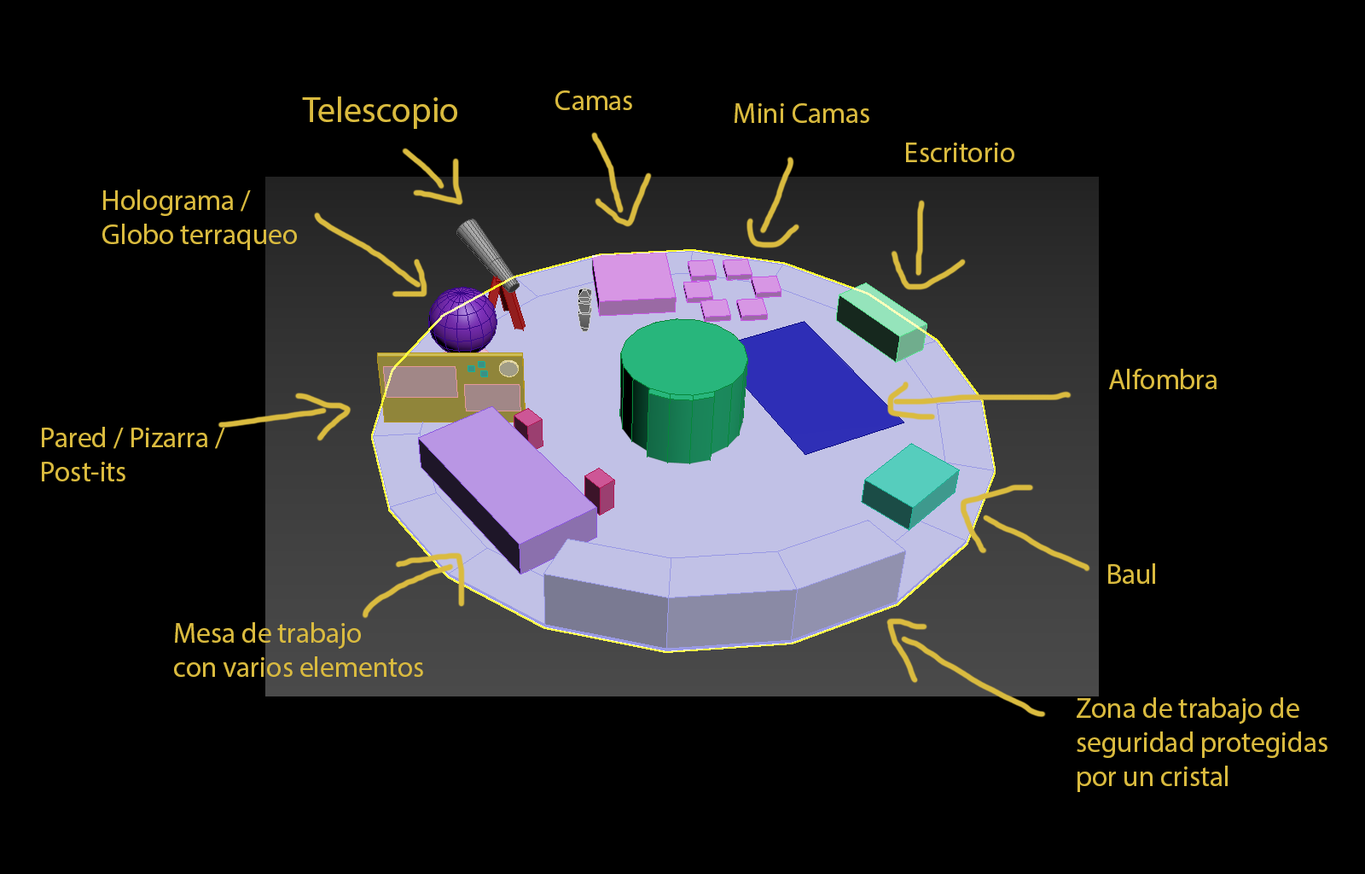
<style>
.page{position:relative;width:1365px;height:874px;background:#000000}
.page>*{position:absolute;margin:0}
.t1{font:35.5px "MyriadPro-Regular";color:#dabb3f}
.t2{font:28.4px "MyriadPro-Regular";color:#dabb3f}
</style>
<div class="page">
<p class="t1" style="left:302px;top:96px;width:155px;height:33px">Telescopio</p>
<p class="t2" style="left:555px;top:90px;width:77px;height:20px">Camas</p>
<p class="t2" style="left:735px;top:103px;width:134px;height:20px">Mini Camas</p>
<p class="t2" style="left:906px;top:142px;width:108px;height:20px">Escritorio</p>
<p class="t2" style="left:102px;top:189px;width:195px;height:61px">Holograma /<br>Globo terraqueo</p>
<p class="t2" style="left:1109px;top:369px;width:108px;height:20px">Alfombra</p>
<p class="t2" style="left:42px;top:427px;width:183px;height:54px">Pared / Pizarra /<br>Post-its</p>
<p class="t2" style="left:1108px;top:563px;width:47px;height:21px">Baul</p>
<p class="t2" style="left:174px;top:622px;width:249px;height:55px">Mesa de trabajo<br>con varios elementos</p>
<p class="t2" style="left:1077px;top:697px;width:250px;height:95px">Zona de trabajo de<br>seguridad protegidas<br>por un cristal</p>
</div>
